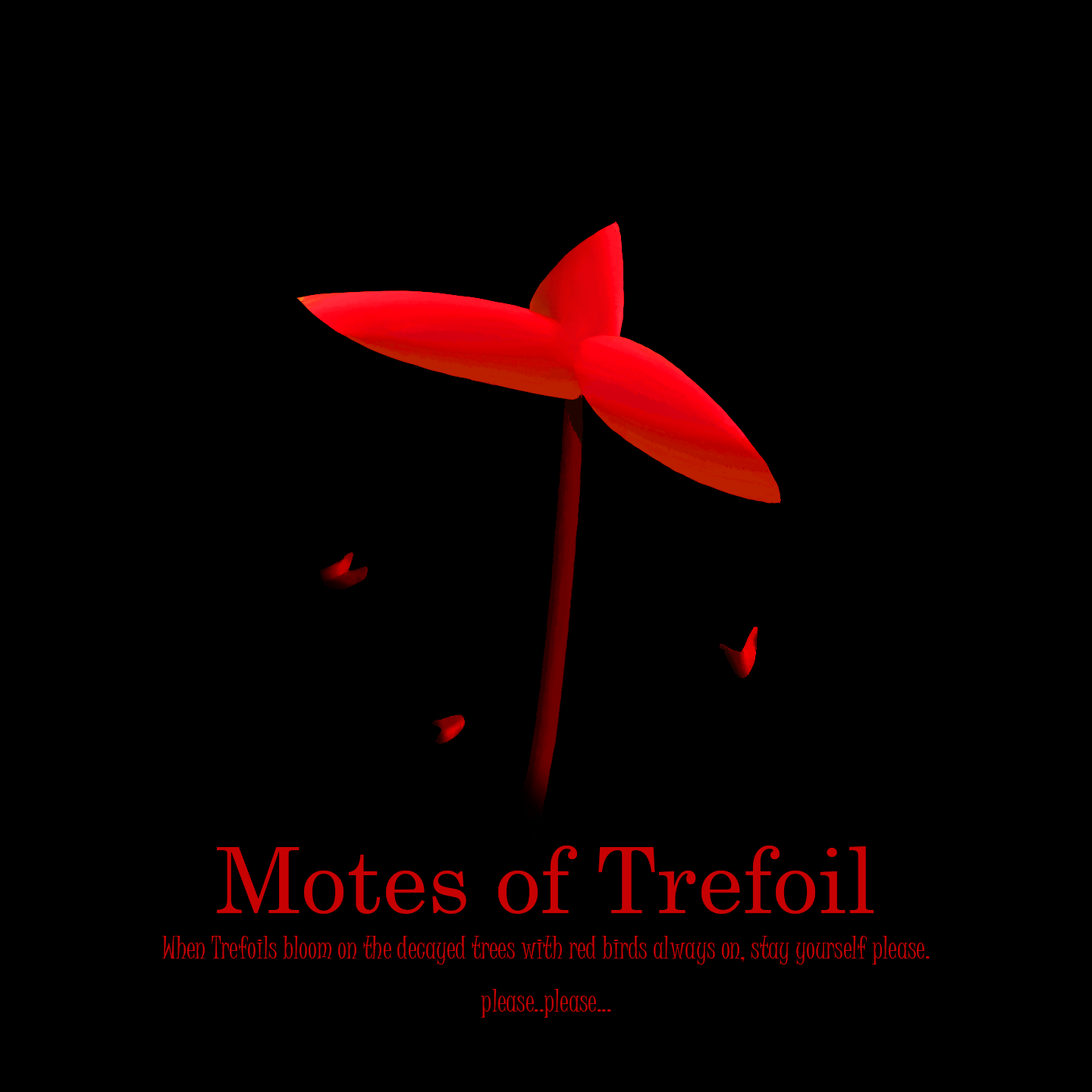
<style>
.page{position:relative;width:1092px;height:1092px;background:#000000}
.page>*{position:absolute;margin:0}
.t1{font:91px "Century";color:#c70102}
.t2{font:30.3px "JuiceITC-Regular";color:#c70102}
</style>
<div class="page">
<p class="t1" style="left:217px;top:846px;width:657px;height:68px">Motes of Trefoil</p>
<p class="t2" style="left:162px;top:936px;width:768px;height:82px;text-align:center">When Trefoils bloom on the decayed trees with red birds always on, stay yourself please.<br>please..please...</p>
</div>
